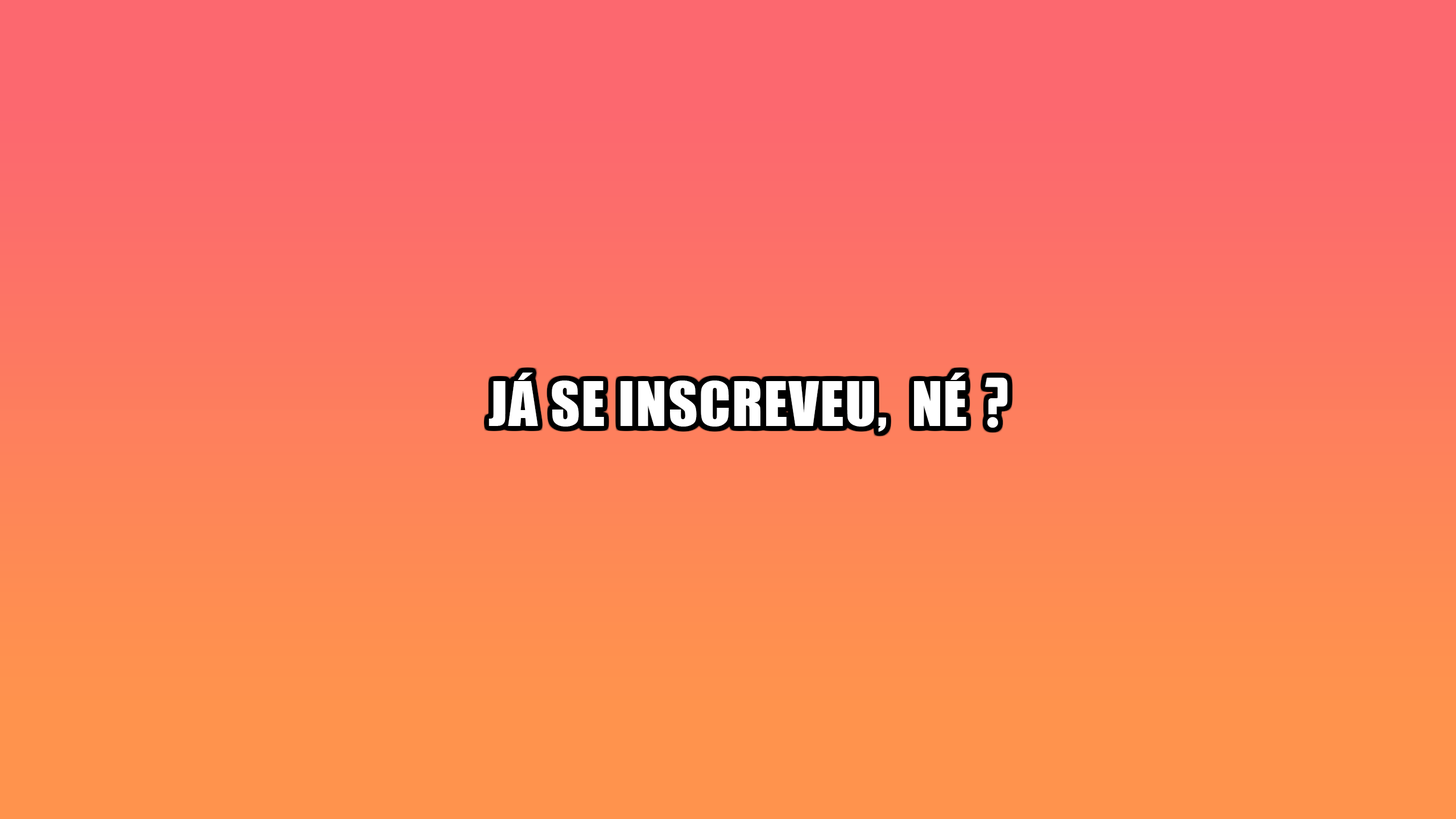
<style>
.page{position:relative;width:1456px;height:819px}
.page>*{position:absolute;margin:0}
.t1{font:56.9px "Impact";letter-spacing:0.025em;color:#ffffff;text-transform:uppercase}
.t2{font:68.2px "AmericanCaptain";letter-spacing:0.025em;color:#ffffff;text-transform:uppercase}
</style>
<div class="page">
<p class="t1" style="left:489px;top:373px;width:477px;height:59px">Já se inscreveu,  né</p>
<p class="t2" style="left:985px;top:378px;width:23px;height:50px">?</p>
</div>
